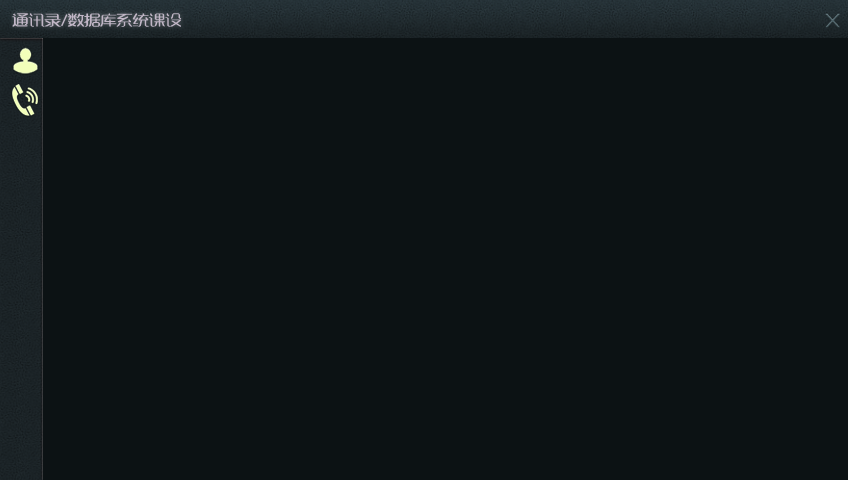
<style>
.page{position:relative;width:848px;height:480px;background:#0c1214}
.page>*{position:absolute;margin:0}
.t1{font:13.5px "MFYaYuan_Noncommercial-Regular";color:#c1b6c6;scale:1.2 1}
.t2{font:18px "MFYaYuan_Noncommercial-Regular";color:#50656b;scale:1.4 1}
</style>
<div class="page">
<p class="t1" style="left:12px;top:13px;width:170px;height:14px">通讯录/数据库系统课设）</p>
<p class="t2" style="left:825px;top:13px;width:15px;height:15px">X</p>
</div>
